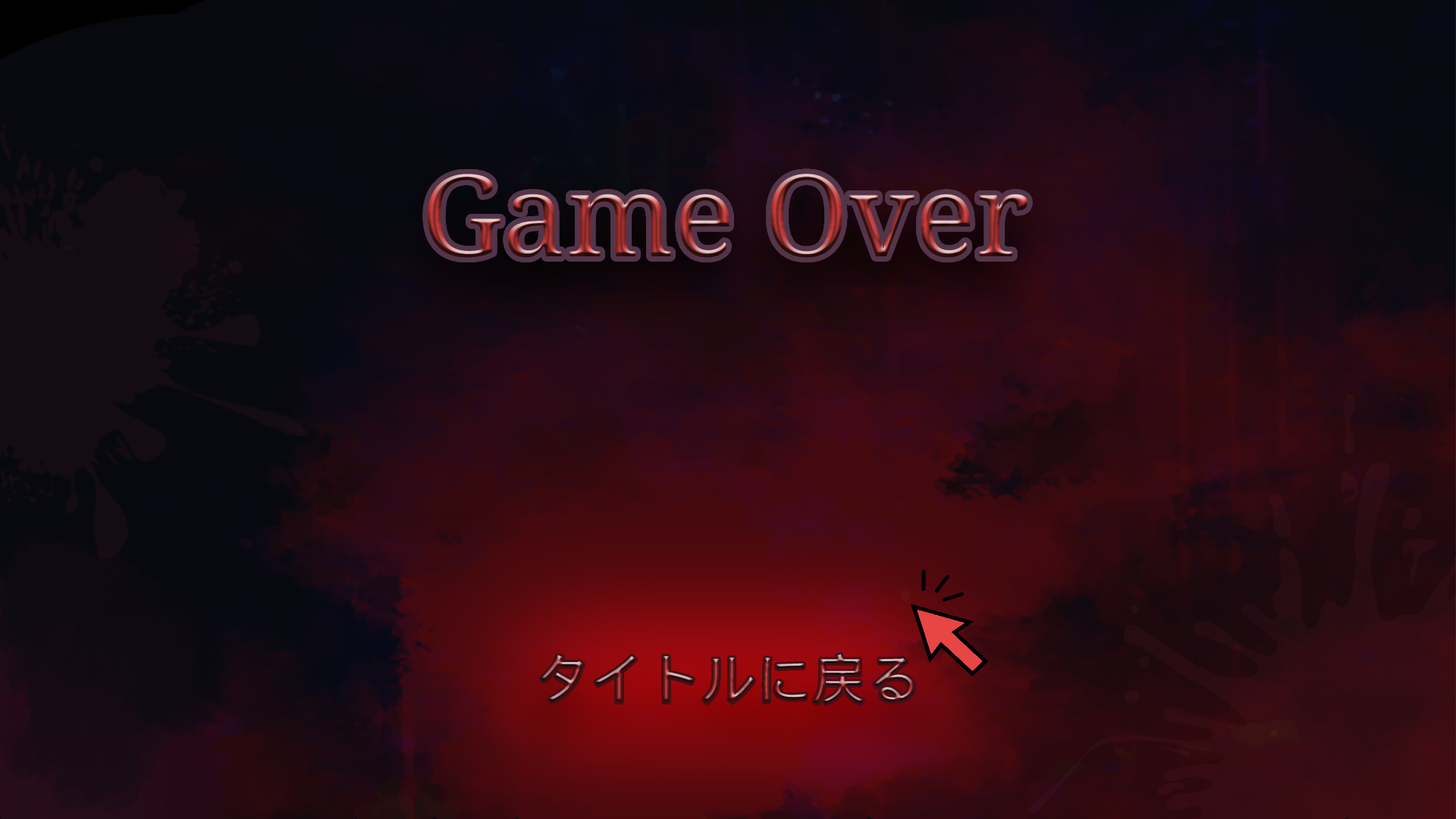
<style>
.page{position:relative;width:1456px;height:819px}
.page>*{position:absolute;margin:0}
.t1{font:113.7px "DroidSerif"}
.t2{font:55.4px "DroidSansFallback"}
</style>
<div class="page">
<p class="t1" style="left:428px;top:174px;width:600px;height:84px">Game Over</p>
<p class="t2" style="left:541px;top:654px;width:374px;height:50px">タイトルに戻る</p>
</div>
